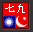
<style>
.page{position:relative;width:33px;height:32px;background:#f20000}
.page>*{position:absolute;margin:0}
.t1{font:10.4px "SimSun";color:#ffffff}
</style>
<div class="page">
<p class="t1" style="left:5px;top:4px;width:20px;height:9px">七九</p>
</div>
